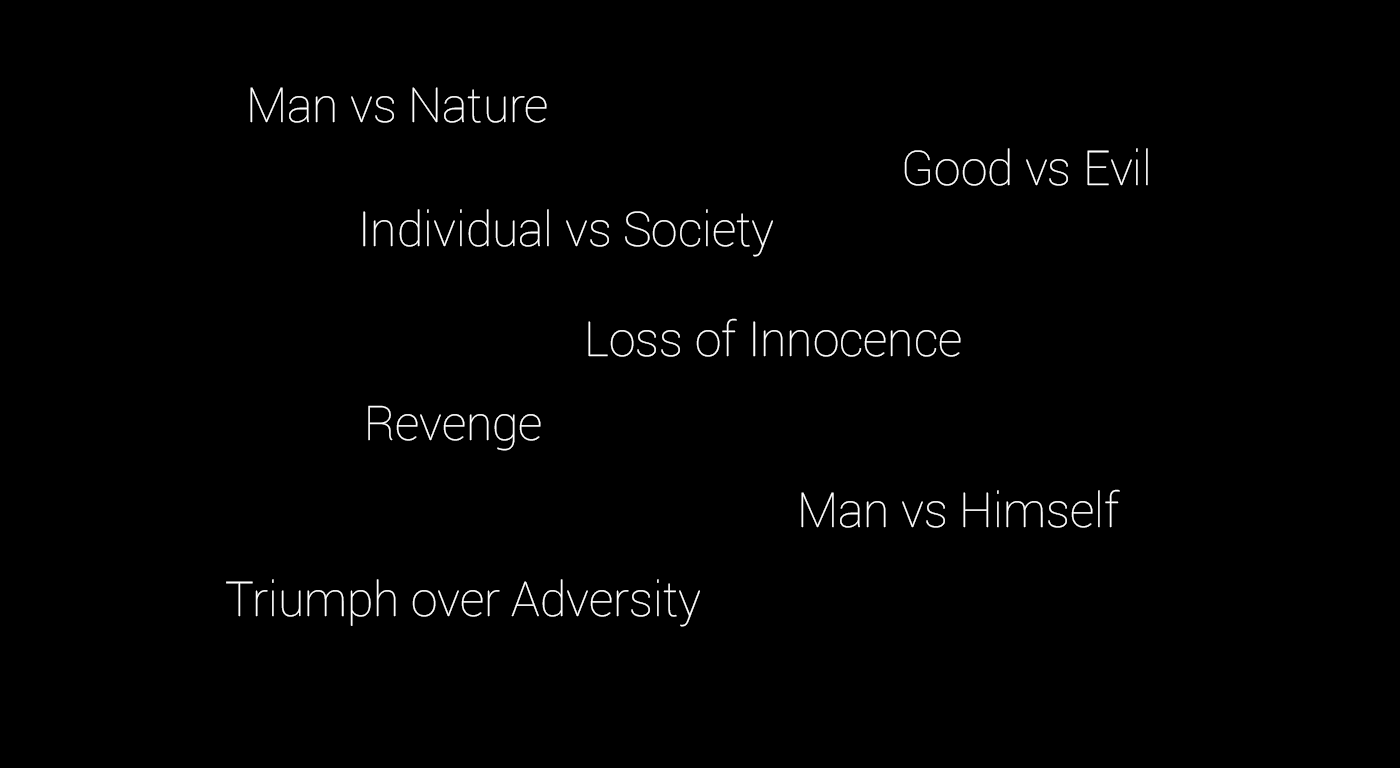
<style>
.page{position:relative;width:1400px;height:768px;background:#000000}
.page>*{position:absolute;margin:0}
.t1{font:48px "Roboto-Thin";color:#ffffff}
</style>
<div class="page">
<p class="t1" style="left:250px;top:87px;width:297px;height:36px">Man vs Nature</p>
<p class="t1" style="left:904px;top:148px;width:244px;height:38px">Good vs Evil</p>
<p class="t1" style="left:363px;top:209px;width:410px;height:48px">Individual vs Society</p>
<p class="t1" style="left:588px;top:318px;width:373px;height:39px">Loss of Innocence</p>
<p class="t1" style="left:368px;top:405px;width:173px;height:46px">Revenge</p>
<p class="t1" style="left:801px;top:489px;width:319px;height:39px">Man vs Himself</p>
<p class="t1" style="left:226px;top:579px;width:474px;height:48px">Triumph over Adversity</p>
</div>
